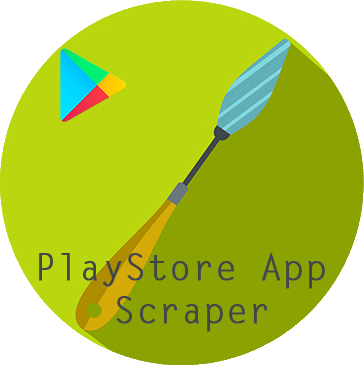
<style>
.page{position:relative;width:364px;height:365px;background:#bad60f}
.page>*{position:absolute;margin:0}
.t1{font:36px "LetterGothicStd";color:#414747;font-weight:bold}
</style>
<div class="page">
<p class="t1" style="left:39px;top:253px;width:286px;height:79px;text-align:center">PlayStore App <br>Scraper</p>
</div>
